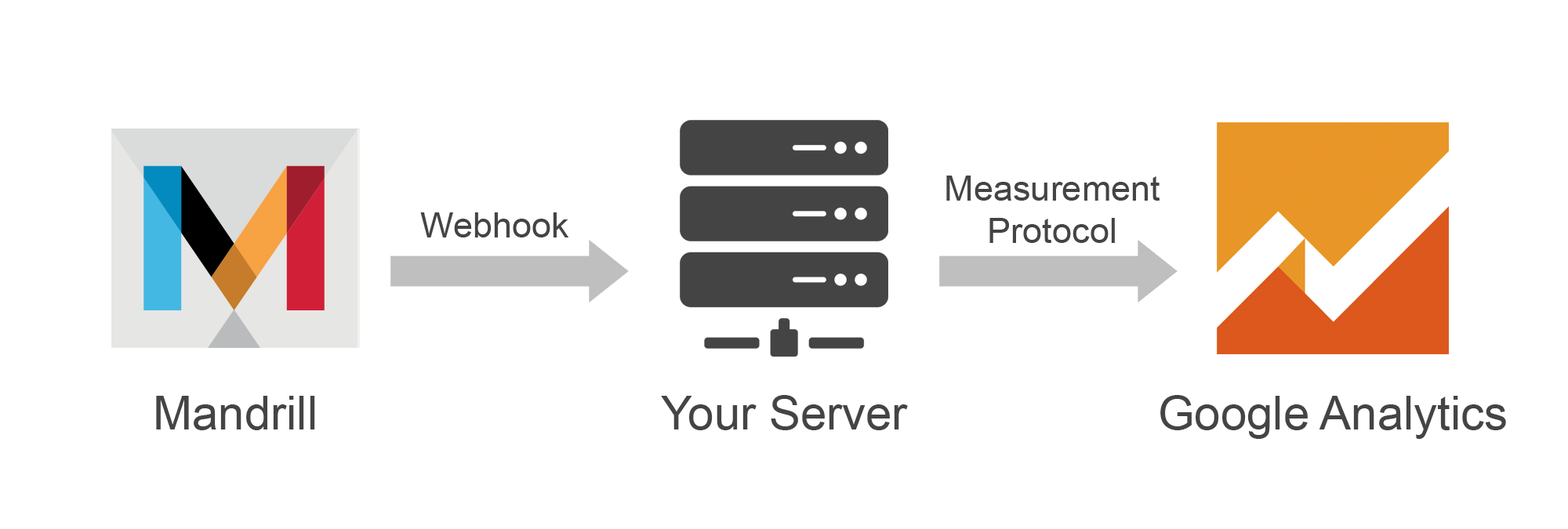
<style>
.page{position:relative;width:1568px;height:529px;background:#ffffff}
.page>*{position:absolute;margin:0}
.t1{font:35.3px "ArialMT";color:#444444}
.t2{font:47px "ArialMT";color:#444444}
</style>
<div class="page">
<p class="t1" style="left:946px;top:176px;width:214px;height:67px;text-align:center">Measurement<br>Protocol</p>
<p class="t1" style="left:420px;top:212px;width:149px;height:26px">Webhook</p>
<p class="t2" style="left:156px;top:396px;width:159px;height:34px">Mandrill</p>
<p class="t2" style="left:661px;top:395px;width:247px;height:35px">Your Server</p>
<p class="t2" style="left:1160px;top:395px;width:346px;height:44px">Google Analytics</p>
</div>
